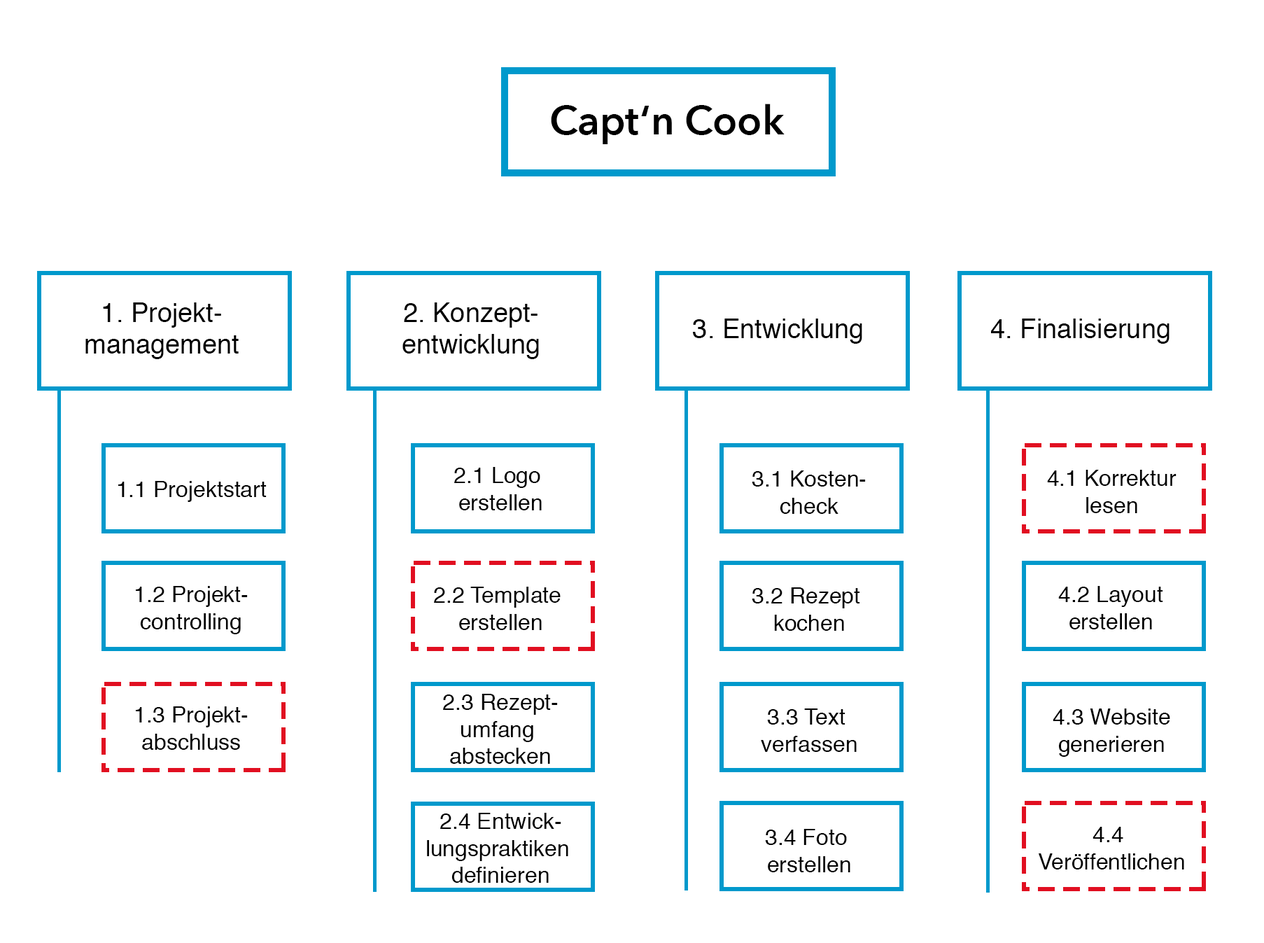
<style>
.page{position:relative;width:1264px;height:943px;background:#ffffff}
.page>*{position:absolute;margin:0}
.t1{font:40.6px "AvenirNext-DemiBold";color:#000000}
.t2{font:26.6px "Helvetica";color:#000000}
.t3{font:22.4px "Helvetica";color:#000000}
</style>
<div class="page">
<p class="t1" style="left:551px;top:104px;width:234px;height:40px">Capt‘n Cook</p>
<p class="t2" style="left:85px;top:302px;width:154px;height:57px;text-align:center">1. Projekt-<br>management</p>
<p class="t2" style="left:403px;top:302px;width:136px;height:57px;text-align:center">2. Konzept-<br>entwicklung</p>
<p class="t2" style="left:693px;top:319px;width:170px;height:25px">3. Entwicklung</p>
<p class="t2" style="left:991px;top:319px;width:179px;height:25px">4. Finalisierung</p>
<p class="t3" style="left:454px;top:467px;width:88px;height:43px;text-align:center">2.1 Logo <br>erstellen</p>
<p class="t3" style="left:752px;top:470px;width:114px;height:44px;text-align:center">3.1 Kosten-<br>check</p>
<p class="t3" style="left:1047px;top:470px;width:130px;height:43px;text-align:center">4.1 Korrektur<br>lesen</p>
<p class="t3" style="left:118px;top:481px;width:149px;height:21px">1.1 Projektstart</p>
<p class="t3" style="left:136px;top:586px;width:112px;height:48px;text-align:center">1.2 Projekt-<br>controlling</p>
<p class="t3" style="left:434px;top:587px;width:127px;height:43px;text-align:center">2.2 Template <br>erstellen</p>
<p class="t3" style="left:752px;top:587px;width:108px;height:44px;text-align:center">3.2 Rezept <br>kochen</p>
<p class="t3" style="left:1059px;top:586px;width:105px;height:43px;text-align:center">4.2 Layout<br>erstellen</p>
<p class="t3" style="left:443px;top:694px;width:115px;height:70px;text-align:center">2.3 Rezept-<br>umfang <br>abstecken</p>
<p class="t3" style="left:136px;top:706px;width:112px;height:44px;text-align:center">1.3 Projekt-<br>abschluss</p>
<p class="t3" style="left:761px;top:709px;width:96px;height:43px;text-align:center">3.3 Text <br>verfassen</p>
<p class="t3" style="left:1053px;top:709px;width:118px;height:48px;text-align:center">4.3 Website<br>generieren</p>
<p class="t3" style="left:427px;top:813px;width:141px;height:70px;text-align:center">2.4 Entwick-<br>lungspraktiken <br>definieren</p>
<p class="t3" style="left:765px;top:829px;width:86px;height:43px;text-align:center">3.4 Foto <br>erstellen</p>
<p class="t3" style="left:1038px;top:827px;width:147px;height:43px;text-align:center">4.4 <br>Veröffentlichen</p>
</div>
